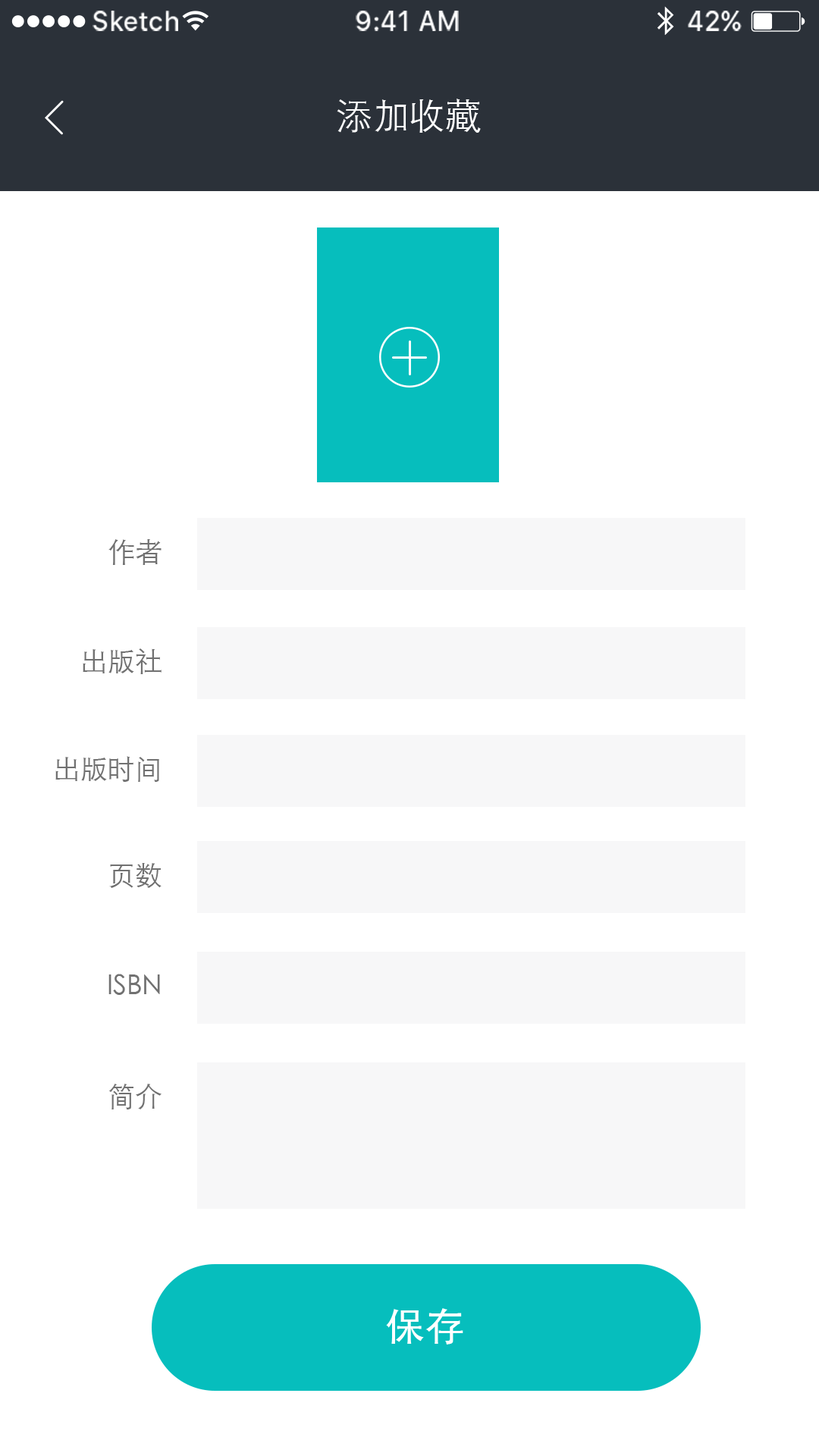
<style>
.page{position:relative;width:819px;height:1456px;background:#ffffff}
.page>*{position:absolute;margin:0}
.t1{font:26.2px "SFUIText-Medium";color:#ffffff}
.t2{font:36.4px "STHeitiSC-Light";color:#ffffff}
.t3{font:27.3px "STHeitiSC-Light";color:#717171}
.t4{font:39.3px "STHeitiSC-Medium";letter-spacing:-0.005em;color:#ffffff}
</style>
<div class="page">
<p class="t1" style="left:93px;top:11px;width:85px;height:20px">Sketch</p>
<p class="t1" style="left:356px;top:11px;width:103px;height:20px">9:41 AM</p>
<p class="t1" style="left:688px;top:11px;width:54px;height:20px">42%</p>
<p class="t2" style="left:337px;top:99px;width:144px;height:34px">添加收藏</p>
<p class="t3" style="left:108px;top:539px;width:54px;height:26px">作者</p>
<p class="t3" style="left:83px;top:648px;width:79px;height:26px">出版社</p>
<p class="t3" style="left:55px;top:756px;width:104px;height:26px">出版时间</p>
<p class="t3" style="left:109px;top:863px;width:53px;height:25px">页数</p>
<p class="t3" style="left:108px;top:974px;width:52px;height:21px">ISBN</p>
<p class="t3" style="left:108px;top:1084px;width:54px;height:25px">简介</p>
<p class="t4" style="left:386px;top:1308px;width:77px;height:37px">保存</p>
</div>
